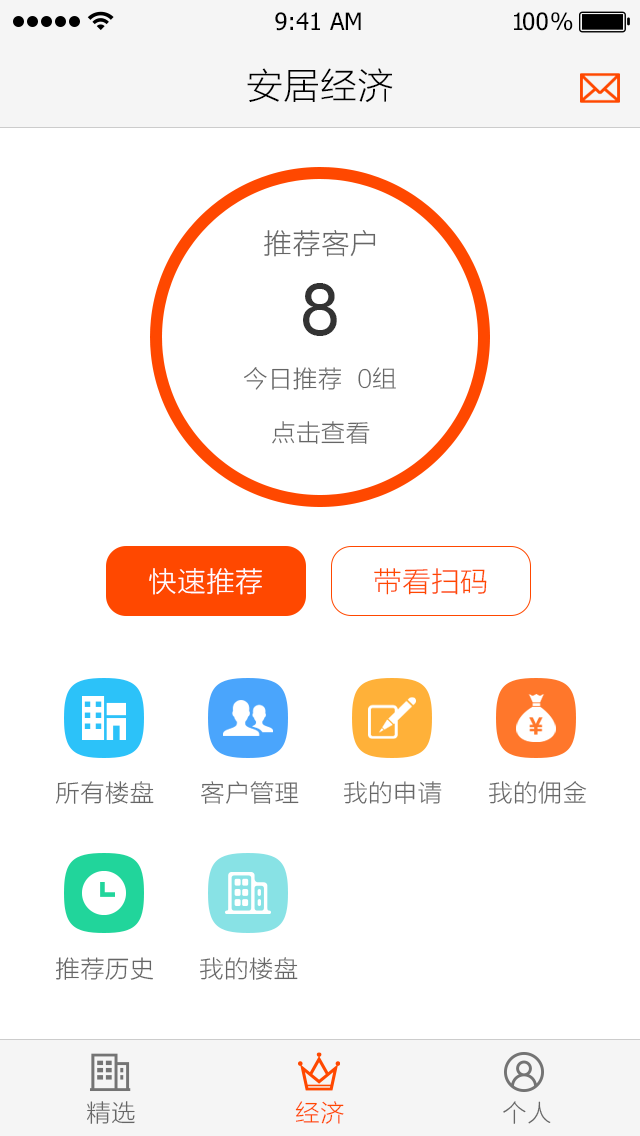
<style>
.page{position:relative;width:640px;height:1136px;background:#ffffff}
.page>*{position:absolute;margin:0}
.t1{font:24px "Tahoma";color:#000000}
.t2{font:24px "Tahoma";letter-spacing:-0.1em;color:#000000}
.t3{font:24px "Tahoma";letter-spacing:-0.25em;color:#000000}
.t4{font:36px "STHeitiSC-Light";color:#000000}
.t5{font:28px "STHeitiSC-Light";color:#666666}
.t6{font:72px "ArialMT";color:#333333}
.t7{font:24px "STHeitiSC-Light";color:#666666}
.t8{font:28px "STHeitiSC-Light";color:#ffffff}
.t9{font:28px "STHeitiSC-Light";color:#ff4800}
.t10{font:24px "STHeitiSC-Light";color:#ff4800}
</style>
<div class="page">
<p class="t1" style="left:275px;top:12px;width:86px;height:19px">9:41 AM</p>
<p class="t2" style="left:514px;top:12px;width:59px;height:19px">1<span class="t1">0</span><span class="t3">0 </span>%</p>
<p class="t4" style="left:247px;top:68px;width:146px;height:35px">安居经济</p>
<p class="t5" style="left:264px;top:230px;width:112px;height:27px">推荐客户</p>
<p class="t6" style="left:303px;top:283px;width:34px;height:53px">8</p>
<p class="t7" style="left:244px;top:367px;width:152px;height:23px">今日推荐  0组</p>
<p class="t7" style="left:272px;top:421px;width:98px;height:23px">点击查看</p>
<p class="t8" style="left:149px;top:568px;width:113px;height:27px">快速推荐</p>
<p class="t9" style="left:374px;top:568px;width:113px;height:27px">带看扫码</p>
<p class="t7" style="left:56px;top:781px;width:98px;height:23px">所有楼盘</p>
<p class="t7" style="left:201px;top:781px;width:98px;height:23px">客户管理</p>
<p class="t7" style="left:344px;top:781px;width:98px;height:23px">我的申请</p>
<p class="t7" style="left:489px;top:781px;width:98px;height:23px">我的佣金</p>
<p class="t7" style="left:56px;top:957px;width:97px;height:23px">推荐历史</p>
<p class="t7" style="left:200px;top:957px;width:98px;height:23px">我的楼盘</p>
<p class="t7" style="left:87px;top:1101px;width:48px;height:23px">精选</p>
<p class="t10" style="left:295px;top:1101px;width:49px;height:23px">经济</p>
<p class="t7" style="left:503px;top:1101px;width:48px;height:23px">个人</p>
</div>
